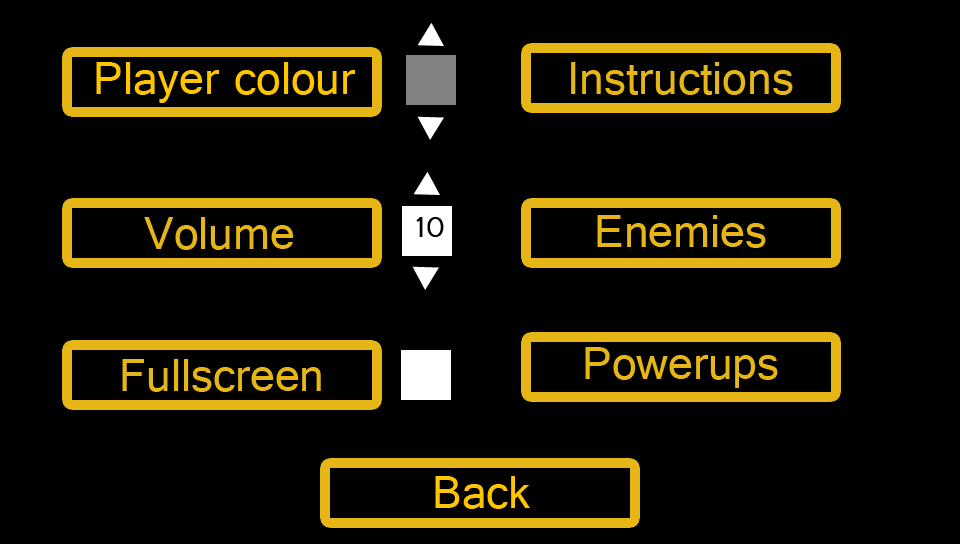
<style>
.page{position:relative;width:960px;height:544px;background:#000000}
.page>*{position:absolute;margin:0}
.t1{font:48px "Gautami";color:#ffc600}
.t2{font:48px "Gautami";color:#e5b615}
.t3{font:30px "Gautami";color:#000000}
</style>
<div class="page">
<p class="t1" style="left:96px;top:62px;width:259px;height:41px">Player colour</p>
<p class="t2" style="left:571px;top:62px;width:222px;height:33px">Instructions</p>
<p class="t2" style="left:144px;top:217px;width:150px;height:33px">Volume</p>
<p class="t3" style="left:416px;top:217px;width:28px;height:20px">10</p>
<p class="t2" style="left:597px;top:215px;width:169px;height:33px">Enemies</p>
<p class="t2" style="left:585px;top:347px;width:193px;height:41px">Powerups</p>
<p class="t2" style="left:122px;top:359px;width:199px;height:33px">Fullscreen</p>
<p class="t1" style="left:435px;top:476px;width:95px;height:33px">Back</p>
</div>
